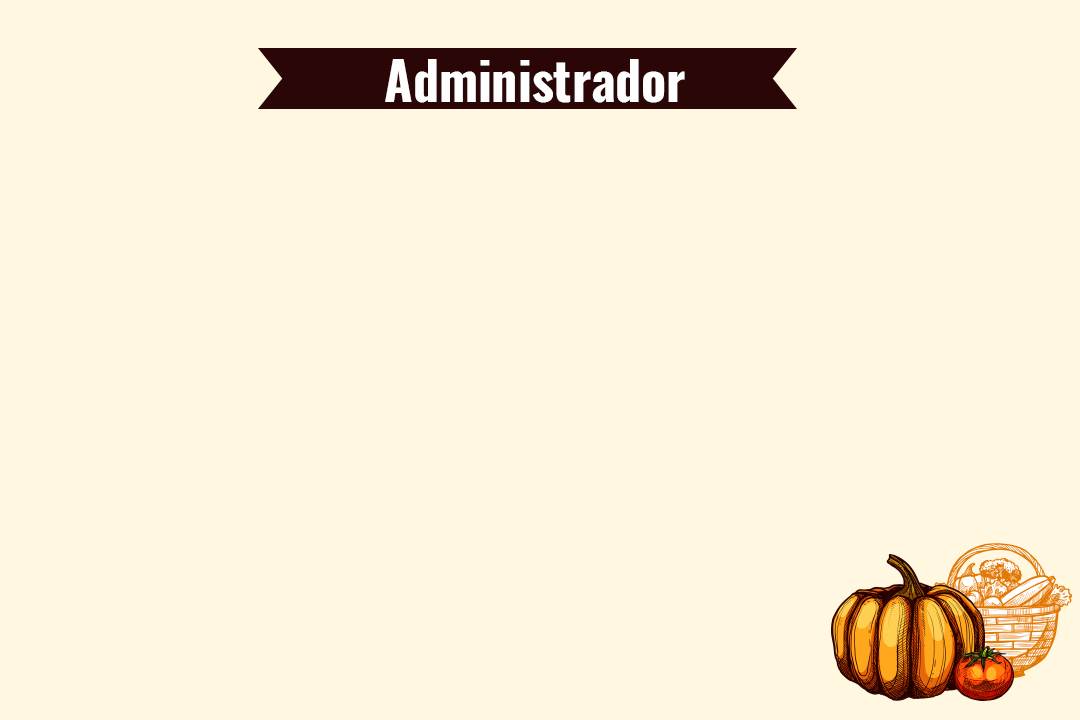
<style>
.page{position:relative;width:1080px;height:720px;background:#fff7df}
.page>*{position:absolute;margin:0}
.t1{font:51.7px "Oswald-Bold";color:#fefefe}
</style>
<div class="page">
<p class="t1" style="left:385px;top:59px;width:300px;height:44px">Administrador</p>
</div>
